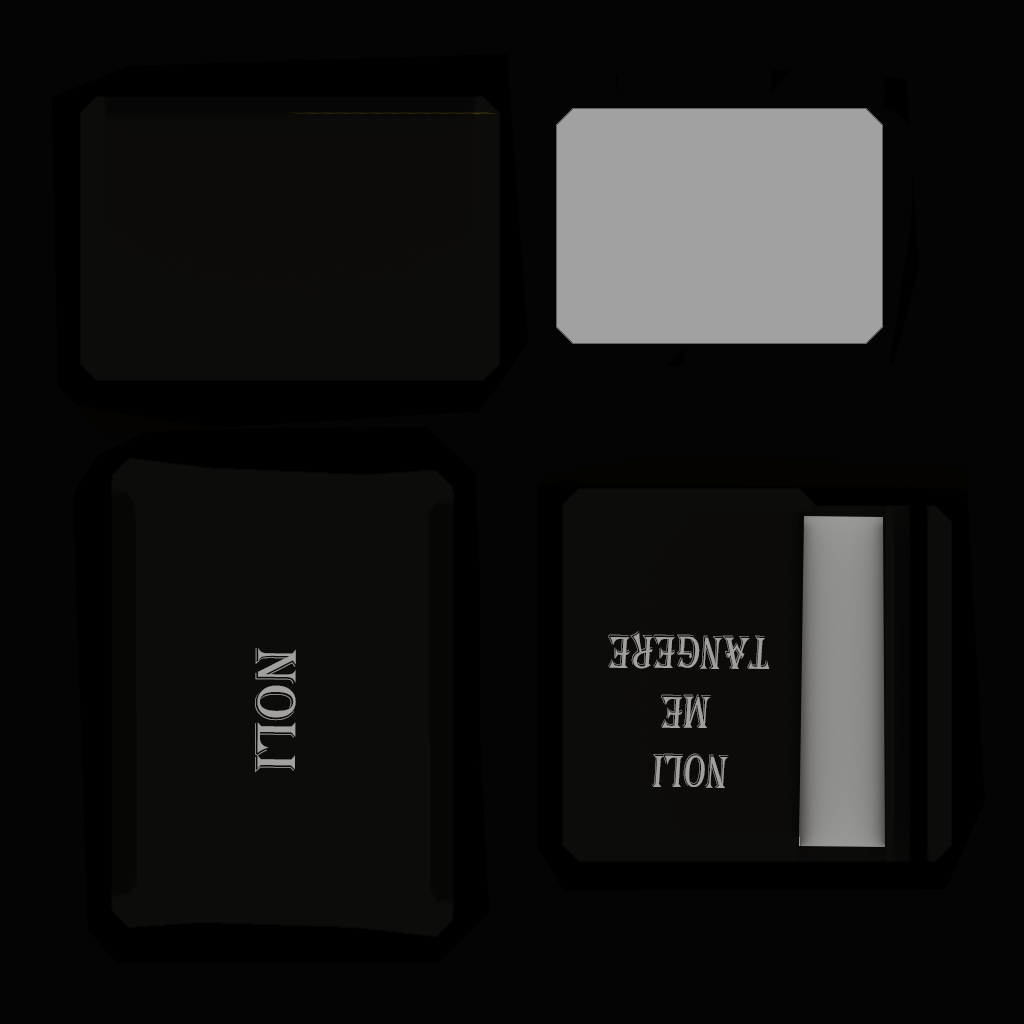
<style>
.page{position:relative;width:1024px;height:1024px;background:#050404}
.page>*{position:absolute;margin:0}
.t1{font:49.6px "Algerian";color:#a1a09c;scale:0.73 1}
.t2{font:60px "Algerian";color:#a2a19d}
</style>
<div class="page">
<p class="t1" style="left:608px;top:631px;width:162px;height:157px;text-align:center;rotate:-179deg">noli  <br>Me<br>tangere</p>
<p class="t2" style="left:255px;top:647px;width:41px;height:126px;rotate:90deg">noli</p>
</div>
